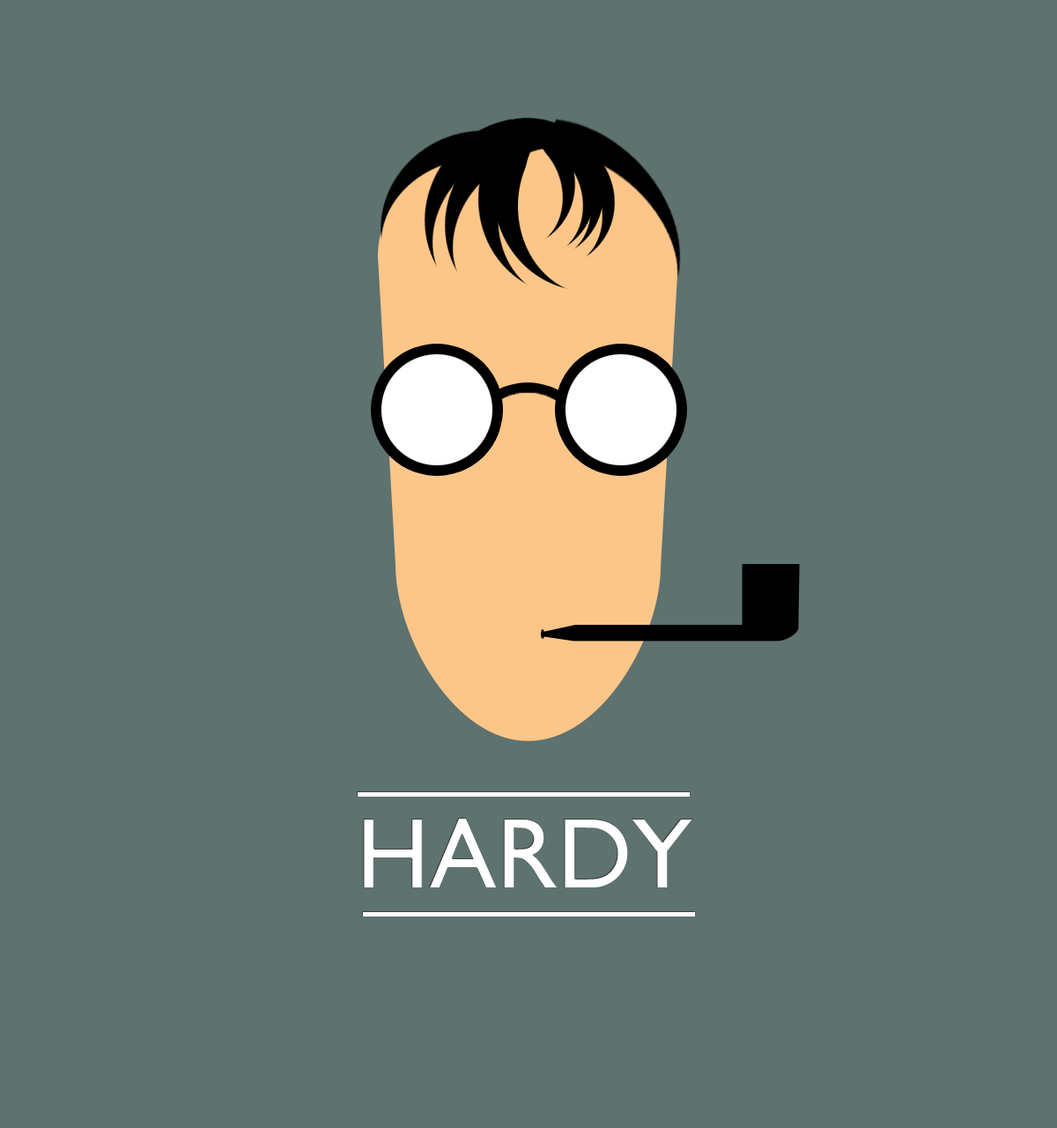
<style>
.page{position:relative;width:1057px;height:1128px;background:#5e7270}
.page>*{position:absolute;margin:0}
.t1{font:100.4px "GillSans";color:#ffffff;font-variant:small-caps}
</style>
<div class="page">
<p class="t1" style="left:363px;top:818px;width:330px;height:69px">HARDY</p>
</div>
